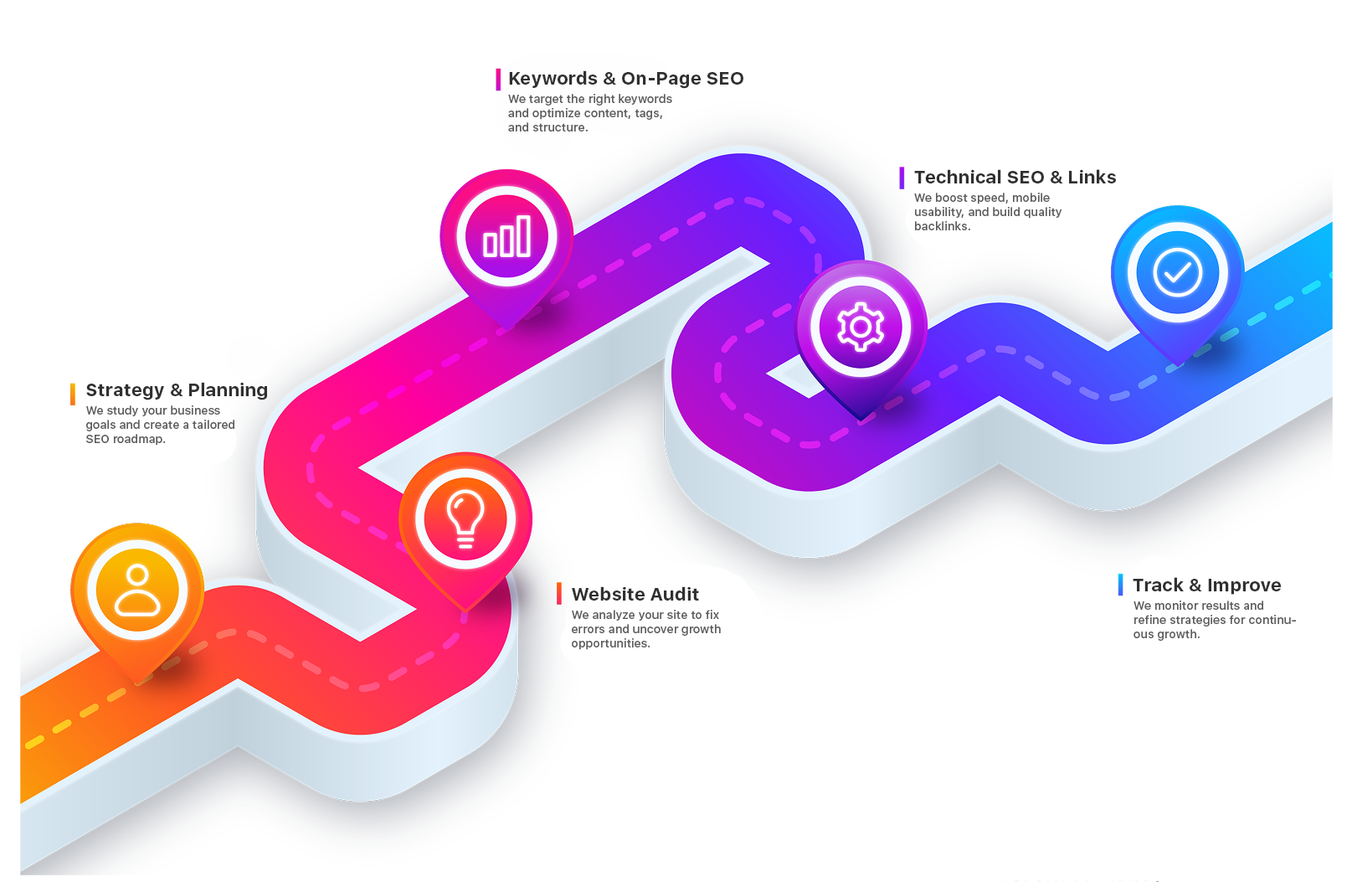
<style>
.page{position:relative;width:1352px;height:882px;background:#ffffff}
.page>*{position:absolute;margin:0}
.t1{font:18.3px "SFUIText-Bold";color:#303030}
.t2{font:11.7px "SFUIText-Medium";color:#5d5d5d}
</style>
<div class="page">
<p class="t1" style="left:509px;top:70px;width:235px;height:19px">Keywords &amp; On-Page SEO</p>
<p class="t2" style="left:508px;top:94px;width:164px;height:37px">We target the right keywords and optimize content, tags, and structure.</p>
<p class="t1" style="left:914px;top:169px;width:202px;height:14px">Technical SEO &amp; Links</p>
<p class="t2" style="left:914px;top:193px;width:149px;height:37px">We boost speed, mobile usability, and build quality backlinks.</p>
<p class="t1" style="left:86px;top:382px;width:181px;height:18px">Strategy &amp; Planning</p>
<p class="t2" style="left:86px;top:405px;width:148px;height:40px">We study your business goals and create a tailored SEO roadmap.</p>
<p class="t1" style="left:1133px;top:577px;width:148px;height:18px">Track &amp; Improve</p>
<p class="t1" style="left:572px;top:586px;width:127px;height:14px">Website Audit</p>
<p class="t2" style="left:1134px;top:600px;width:162px;height:41px">We monitor results and refine strategies for continuous growth.</p>
<p class="t2" style="left:572px;top:610px;width:149px;height:40px">We analyze your site to fix errors and uncover growth opportunities.</p>
</div>
